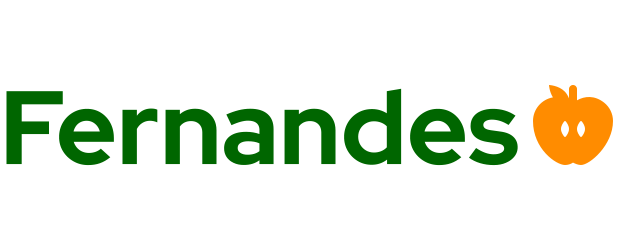
<style>
.page{position:relative;width:625px;height:250px;background:#ffffff}
.page>*{position:absolute;margin:0}
.t1{font:104.2px "RedHatDisplayRoman-Bold";color:#006600}
</style>
<div class="page">
<p class="t1" style="left:6px;top:88px;width:512px;height:78px">Fernandes</p>
</div>
